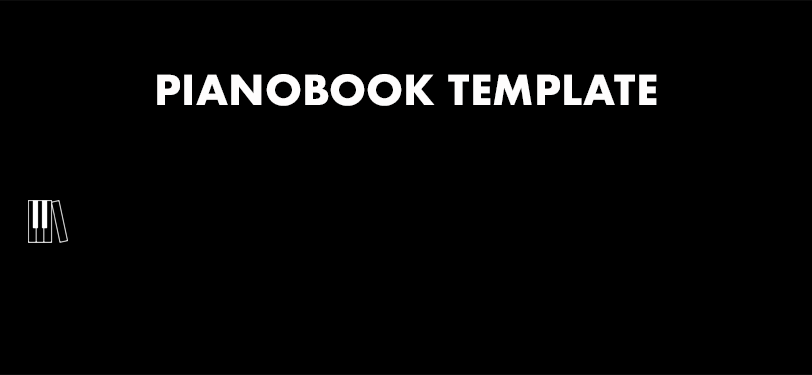
<style>
.page{position:relative;width:812px;height:375px;background:#000000}
.page>*{position:absolute;margin:0}
.t1{font:40px "Futura-Bold";color:#fefdfd;text-transform:uppercase}
</style>
<div class="page">
<p class="t1" style="left:157px;top:74px;width:500px;height:32px">PIANOBOOK TEMPLATE</p>
</div>
